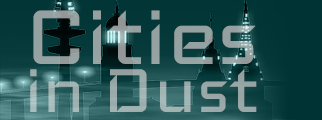
<style>
.page{position:relative;width:322px;height:120px}
.page>*{position:absolute;margin:0}
.t1{font:86.7px/48.2px "Iceland-Regular";color:#97a4a4}
.t2{font:108.4px/48.2px "Iceland-Regular";color:#97a4a4}
</style>
<div class="page">
<p class="t1" style="left:30px;top:10px;width:227px;height:102px;text-align:justify"><span class="t2">Cities<br></span>in Dust</p>
</div>
